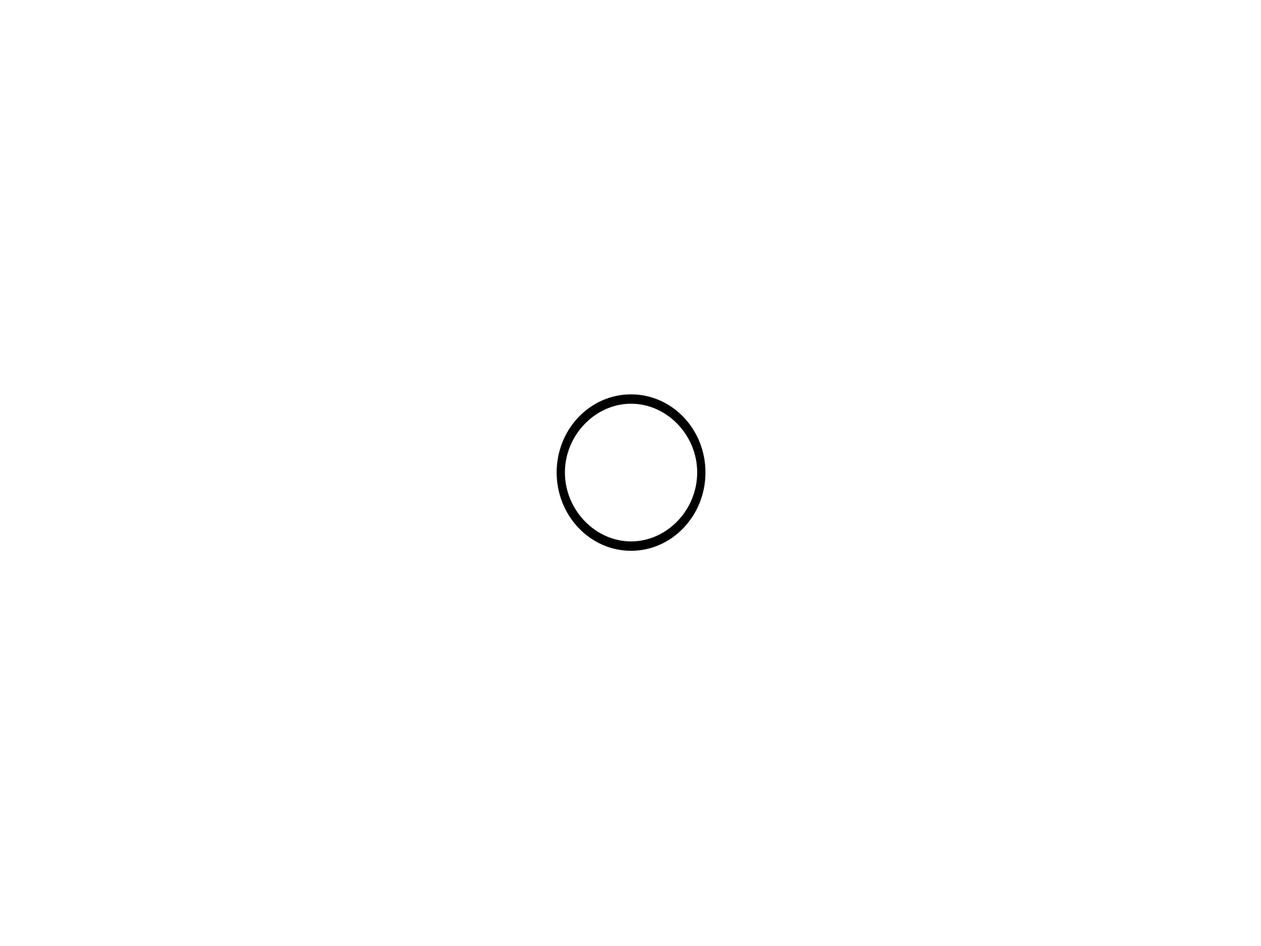
<style>
.page{position:relative;width:1261px;height:946px;background:#ffffff}
.page>*{position:absolute;margin:0}
.t1{font:222.4px "Alcubierre";color:#000000}
</style>
<div class="page">
<p class="t1" style="left:557px;top:394px;width:149px;height:156px">O</p>
</div>
